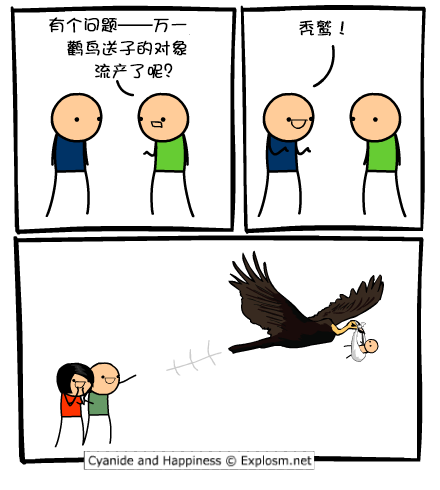
<style>
.page{position:relative;width:440px;height:490px;background:#ffffff}
.page>*{position:absolute;margin:0}
.t1{font:17px/23px "DFShaoNvW5";color:#000000;font-weight:bold}
.t2{font:17px "DFShaoNvW5";color:#000000;font-weight:bold}
</style>
<div class="page">
<p class="t1" style="left:49px;top:17px;width:138px;height:62px">有个问题——万一<br>  鹳鸟送子的对象<br>     流产了呢？</p>
<p class="t2" style="left:299px;top:20px;width:45px;height:16px">秃鹫！</p>
</div>
